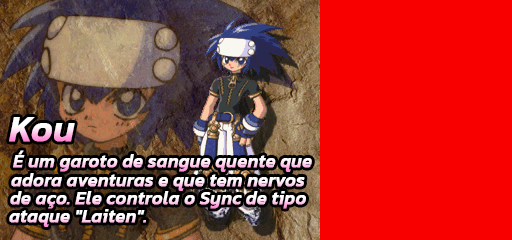
<style>
.page{position:relative;width:512px;height:240px;background:#f80000}
.page>*{position:absolute;margin:0}
.t1{font:36px "Kanit-MediumItalic";font-weight:bold}
.t2{font:18px "Kanit-MediumItalic";font-weight:bold}
.t3{font:18px "Kanit-MediumItalic";color:#ffffff;font-weight:bold}
</style>
<div class="page">
<p class="t1" style="left:9px;top:117px;width:66px;height:25px">Kou</p>
<p class="t2" style="left:13px;top:150px;width:299px;height:22px">É um garoto de sangue quente que</p>
<p class="t3" style="left:11px;top:173px;width:294px;height:18px">adora aventuras e que tem nervos</p>
<p class="t2" style="left:10px;top:191px;width:296px;height:18px">de aço. Ele controla o Sync de tipo</p>
<p class="t3" style="left:9px;top:209px;width:137px;height:18px">ataque "Laiten".</p>
</div>
